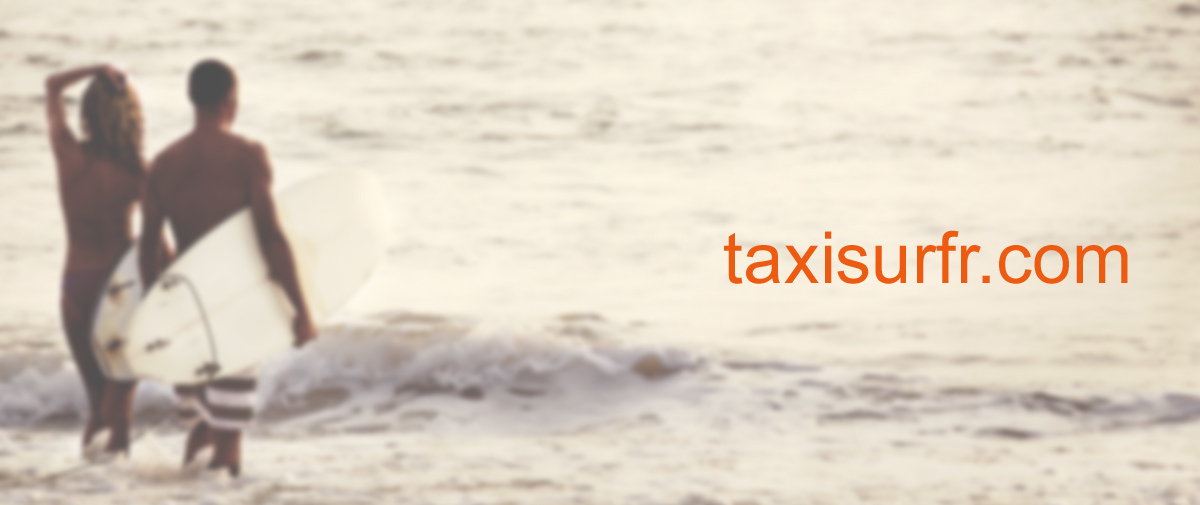
<style>
.page{position:relative;width:1200px;height:505px}
.page>*{position:absolute;margin:0}
.t1{font:72px "ArialMT";color:#ec5b11}
</style>
<div class="page">
<p class="t1" style="left:724px;top:230px;width:404px;height:54px">taxisurfr.com</p>
</div>
